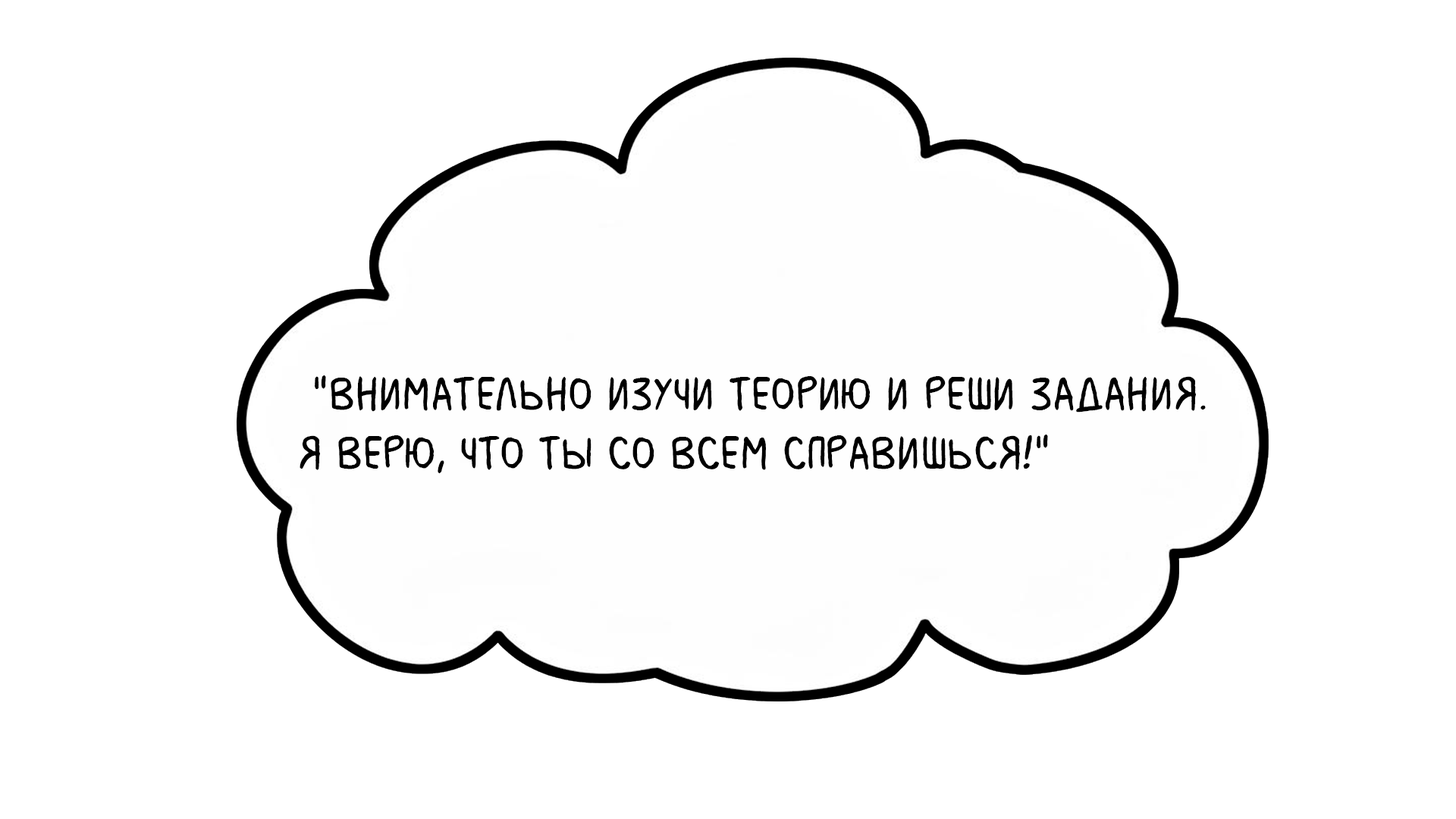
<style>
.page{position:relative;width:1456px;height:819px;background:#ffffff}
.page>*{position:absolute;margin:0}
.t1{font:49.3px "MilkMustacheBB";color:#000000}
</style>
<div class="page">
<p class="t1" style="left:300px;top:375px;width:906px;height:98px">"Внимательно изучи теорию и реши задания. <br>Я верю, что ты со всем справишься!"</p>
</div>
